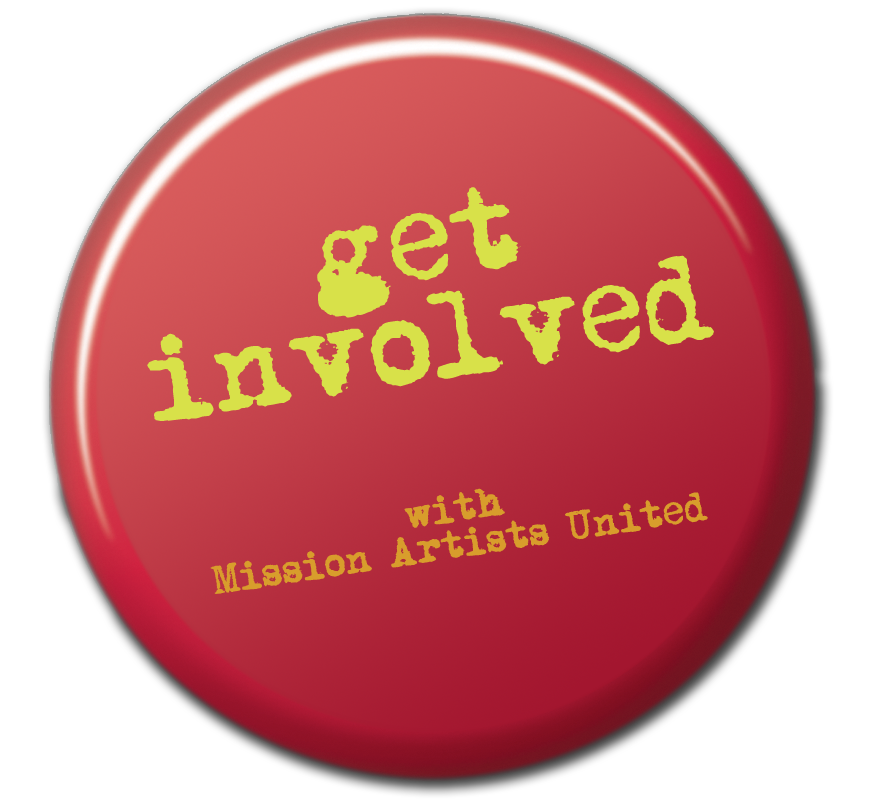
<style>
.page{position:relative;width:869px;height:808px;background:#ffffff}
.page>*{position:absolute;margin:0}
.t1{font:108px/100px "MomsTypewriter";color:#d8e149}
.t2{font:36px/36px "MomsTypewriter";color:#d89d2c}
</style>
<div class="page">
<p class="t1" style="left:147px;top:187px;width:567px;height:234px;text-align:center;rotate:-9deg">get<br>involved</p>
<p class="t2" style="left:210px;top:488px;width:498px;height:106px;text-align:center;rotate:-9deg">with<br>Mission Artists United</p>
</div>
